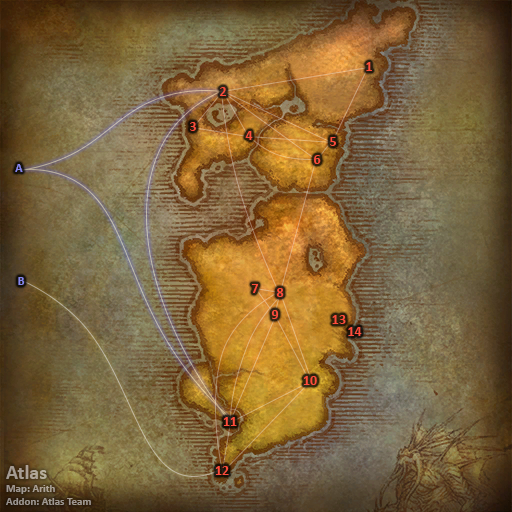
<style>
.page{position:relative;width:512px;height:512px}
.page>*{position:absolute;margin:0}
.t1{font:14px "Calibri-Bold";color:#ff4c3c}
.t2{font:12px "Calibri-Bold";color:#8788ee}
.t3{font:11px "Calibri-Bold";color:#a59b92}
.t4{font:20px "Calibri-Bold";color:#a59b92}
</style>
<div class="page">
<p class="t1" style="left:366px;top:62px;width:6px;height:9px">1</p>
<p class="t1" style="left:220px;top:87px;width:7px;height:9px">2</p>
<p class="t1" style="left:190px;top:122px;width:6px;height:9px">3</p>
<p class="t1" style="left:245px;top:131px;width:8px;height:9px">4</p>
<p class="t1" style="left:330px;top:137px;width:6px;height:9px">5</p>
<p class="t1" style="left:314px;top:155px;width:7px;height:9px">6</p>
<p class="t2" style="left:15px;top:164px;width:8px;height:8px">A</p>
<p class="t2" style="left:18px;top:277px;width:7px;height:8px">B</p>
<p class="t1" style="left:251px;top:284px;width:8px;height:9px">7</p>
<p class="t1" style="left:276px;top:288px;width:8px;height:9px">8</p>
<p class="t1" style="left:271px;top:310px;width:8px;height:9px">9</p>
<p class="t1" style="left:332px;top:315px;width:14px;height:9px">13</p>
<p class="t1" style="left:348px;top:327px;width:14px;height:9px">14</p>
<p class="t1" style="left:303px;top:376px;width:14px;height:9px">10</p>
<p class="t1" style="left:223px;top:417px;width:14px;height:9px">11</p>
<p class="t3" style="left:6px;top:465px;width:85px;height:40px"><span class="t4">Atlas<br></span>Map: Arith<br>Addon: Atlas Team</p>
<p class="t1" style="left:215px;top:466px;width:14px;height:9px">12</p>
</div>
